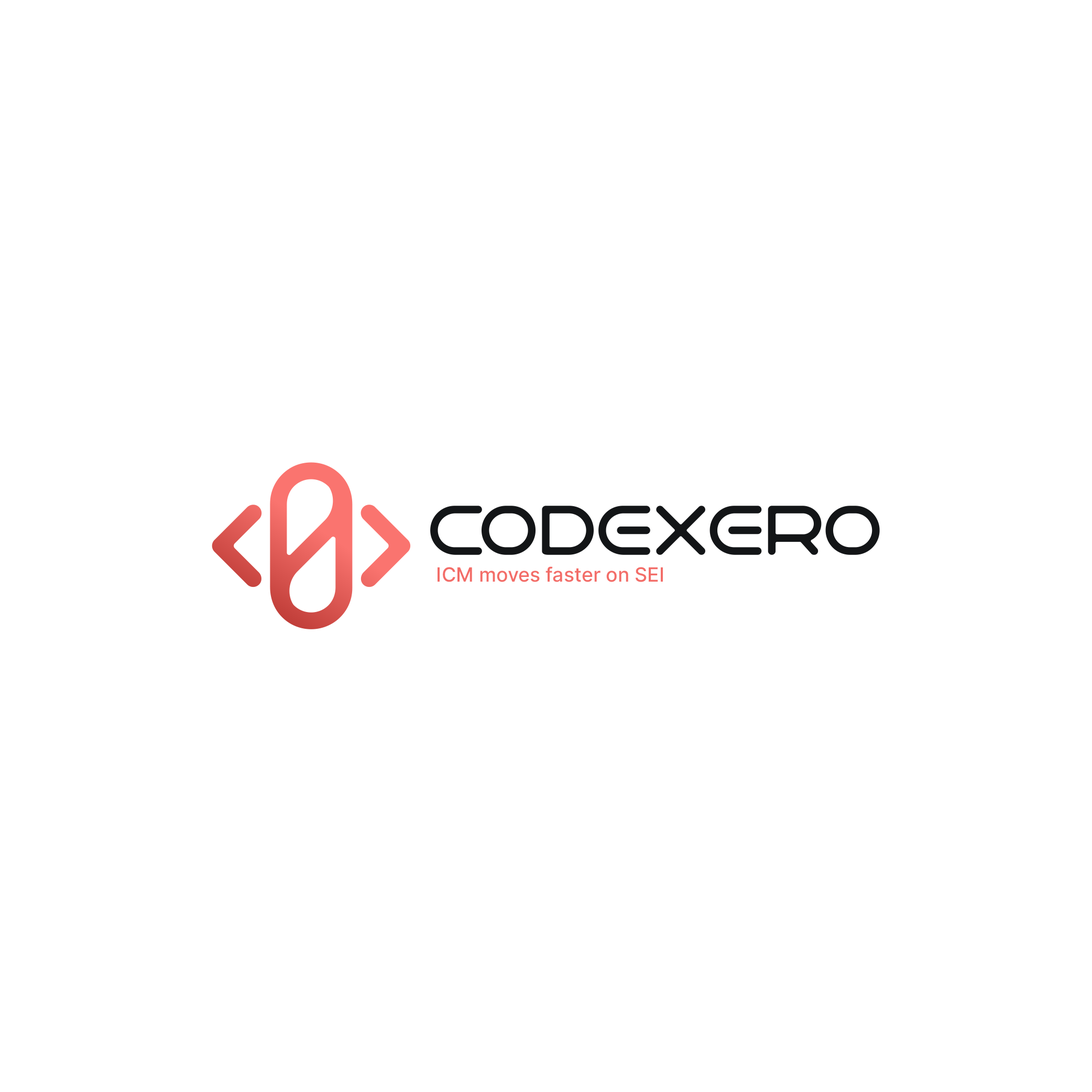
<style>
.page{position:relative;width:1092px;height:1092px;background:#ffffff}
.page>*{position:absolute;margin:0}
.t1{font:19.6px "Inter-Medium";color:#f46e69}
</style>
<div class="page">
<p class="t1" style="left:438px;top:566px;width:225px;height:16px">ICM moves faster on SEI</p>
</div>
